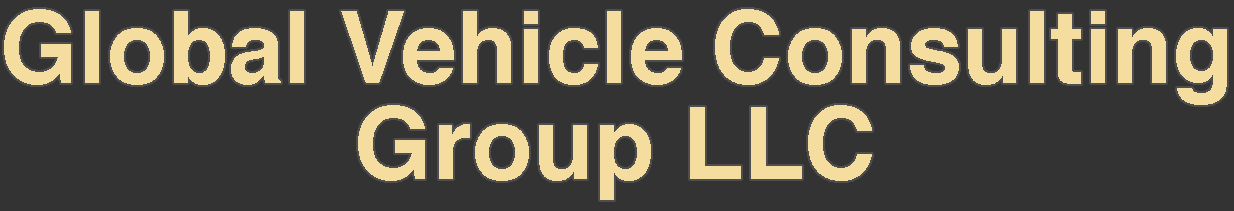
<style>
.page{position:relative;width:1234px;height:211px;background:#333333}
.page>*{position:absolute;margin:0}
.t1{font:100px "Helvetica-Bold";color:#f5dc9f}
</style>
<div class="page">
<p class="t1" style="left:4px;top:9px;width:1223px;height:96px">Global Vehicle Consulting</p>
<p class="t1" style="left:358px;top:105px;width:514px;height:95px">Group LLC</p>
</div>
